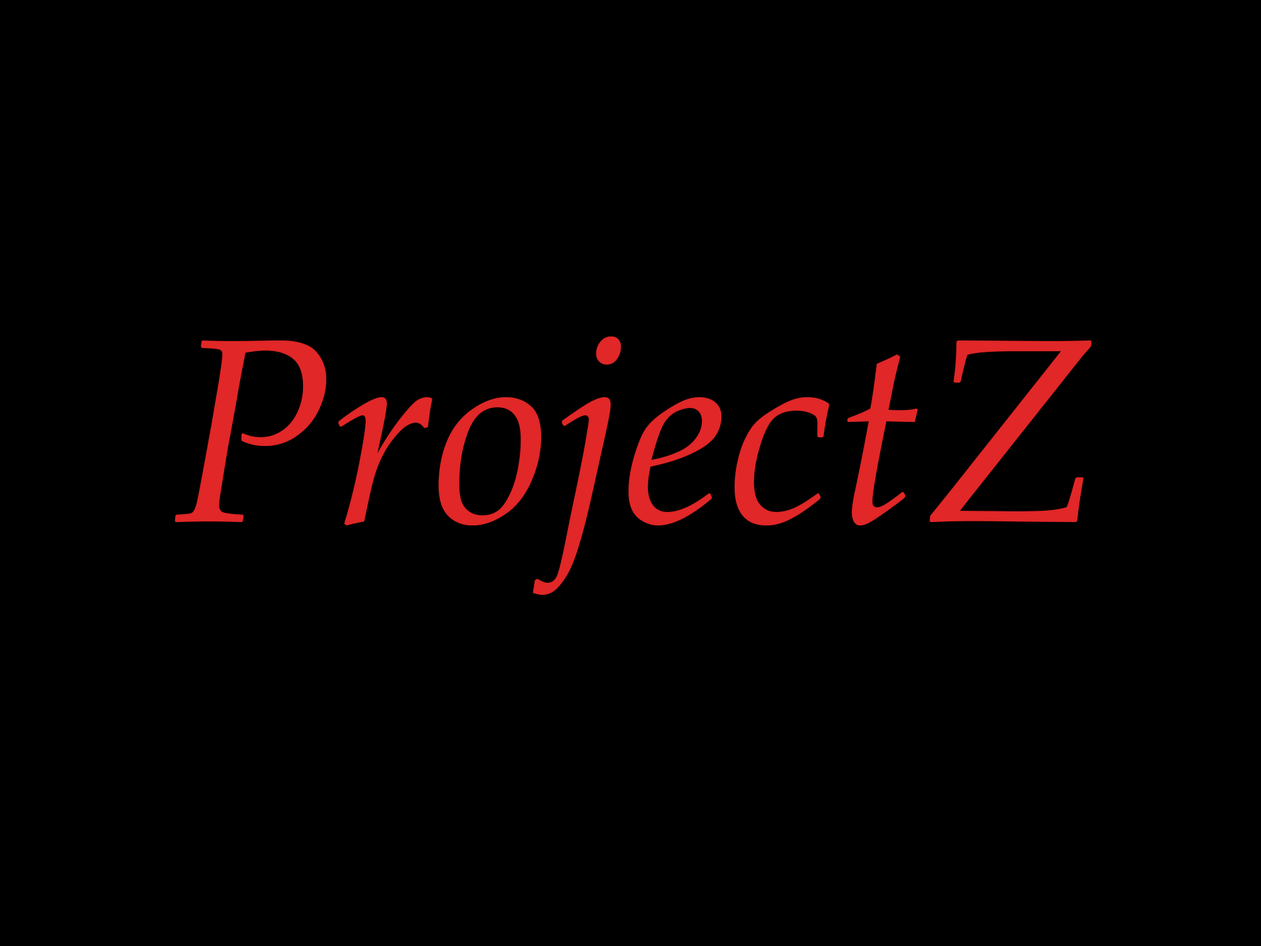
<style>
.page{position:relative;width:1261px;height:946px;background:#000000}
.page>*{position:absolute;margin:0}
.t1{font:263.1px "PalatinoLinotype-Italic";color:#e12727}
</style>
<div class="page">
<p class="t1" style="left:175px;top:336px;width:917px;height:259px">ProjectZ</p>
</div>
